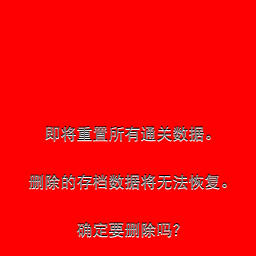
<style>
.page{position:relative;width:256px;height:256px;background:#ff0000}
.page>*{position:absolute;margin:0}
.t1{font:16px/24px "DFPHeiW5-GB"}
</style>
<div class="page">
<p class="t1" style="left:29px;top:125px;width:198px;height:112px;text-align:center">即将重置所有通关数据。<br><br>删除的存档数据将无法恢复。<br><br>确定要删除吗？</p>
</div>
